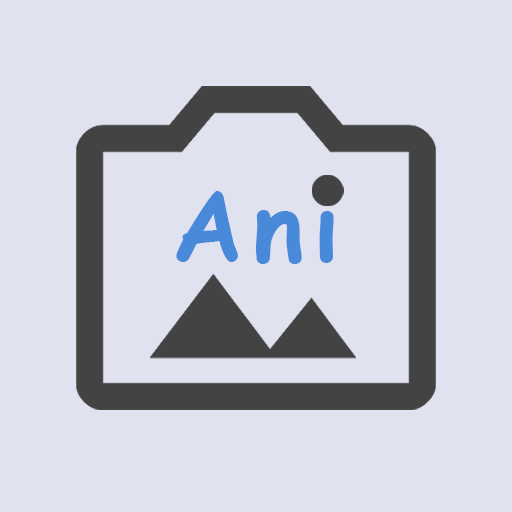
<style>
.page{position:relative;width:512px;height:512px;background:#e0e2ef}
.page>*{position:absolute;margin:0}
.t1{font:96.5px "ComicSansMS-Bold";letter-spacing:0.1em;color:#4889d9}
</style>
<div class="page">
<p class="t1" style="left:176px;top:191px;width:161px;height:73px">Ani</p>
</div>
